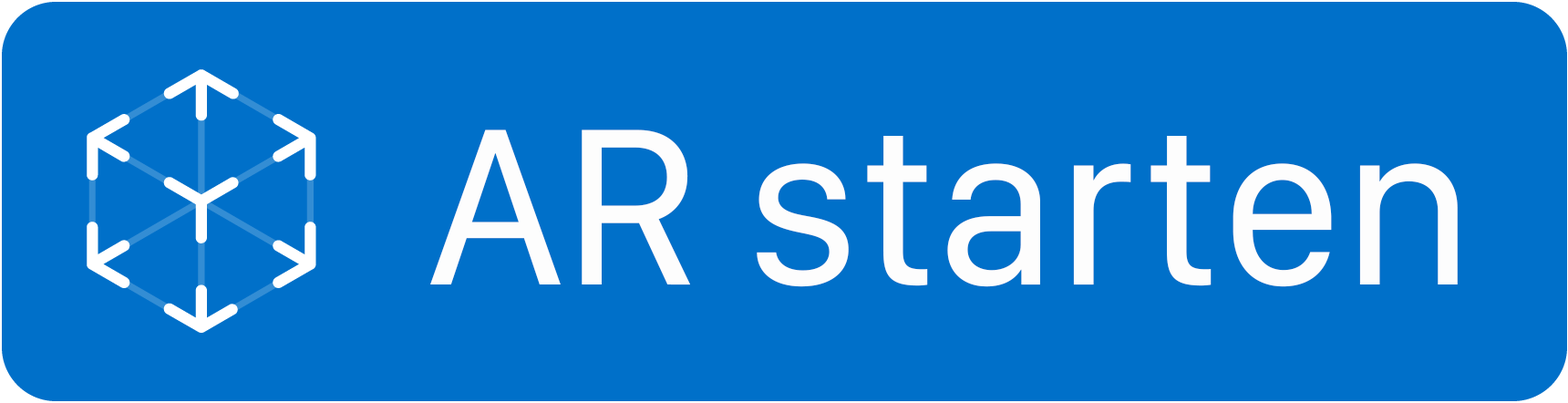
<style>
.page{position:relative;width:1568px;height:403px;background:#0070c9}
.page>*{position:absolute;margin:0}
.t1{font:231.7px "SFCompactDisplay-Regular";color:#fdfdfd}
</style>
<div class="page">
<p class="t1" style="left:430px;top:129px;width:1028px;height:158px">AR starten</p>
</div>
